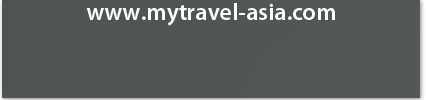
<style>
.page{position:relative;width:426px;height:100px;background:#515455}
.page>*{position:absolute;margin:0}
.t1{font:24px "MyriadPro-Semibold";color:#fafcfc}
</style>
<div class="page">
<p class="t1" style="left:86px;top:3px;width:249px;height:23px">www.mytravel-asia.com</p>
</div>
